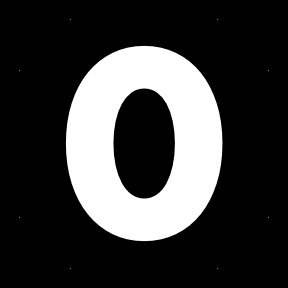
<style>
.page{position:relative;width:288px;height:288px;background:#000000}
.page>*{position:absolute;margin:0}
.t1{font:245px "Futura-Bold";color:#ffffff}
</style>
<div class="page">
<p class="t1" style="left:65px;top:45px;width:158px;height:197px">0</p>
</div>
